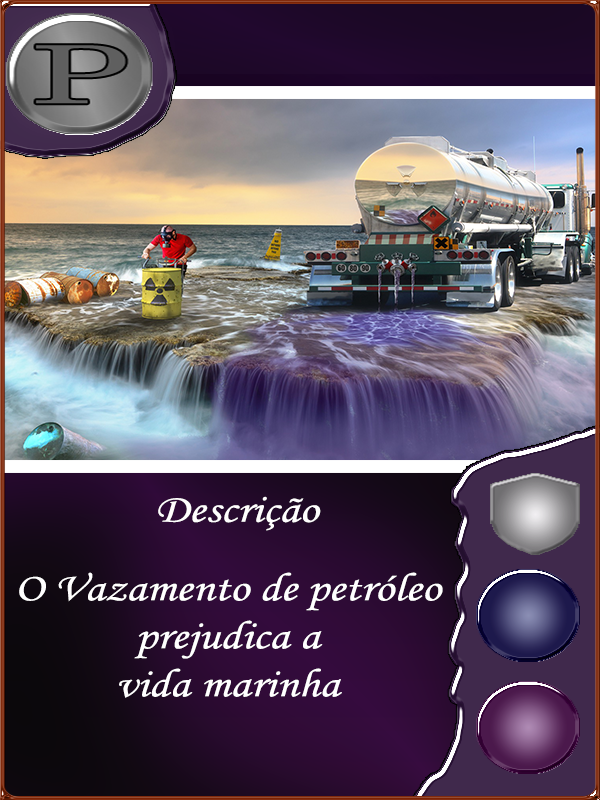
<style>
.page{position:relative;width:600px;height:800px}
.page>*{position:absolute;margin:0}
.t1{font:40px "MonotypeCorsiva";color:#fffefe;scale:1.2 1}
.t2{font:40px "MonotypeCorsiva";color:#ffffff;scale:1.2 1}
</style>
<div class="page">
<p class="t1" style="left:158px;top:496px;width:163px;height:35px">Descrição</p>
<p class="t2" style="left:19px;top:572px;width:424px;height:126px;text-align:center">O Vazamento de petróleo<br> prejudica a <br>vida marinha</p>
</div>
